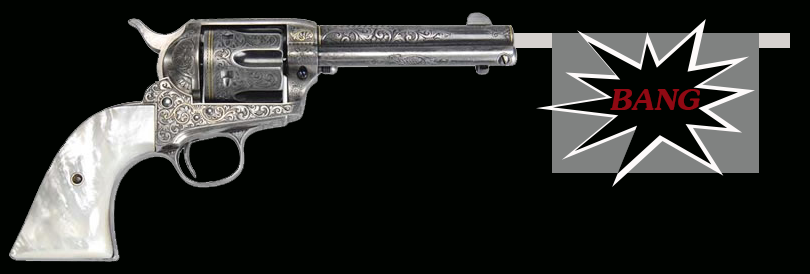
<style>
.page{position:relative;width:810px;height:274px;background:#000300}
.page>*{position:absolute;margin:0}
.t1{font:48px "JasmineUPCBoldItalic";color:#900913}
</style>
<div class="page">
<p class="t1" style="left:610px;top:89px;width:90px;height:21px">BANG</p>
</div>
